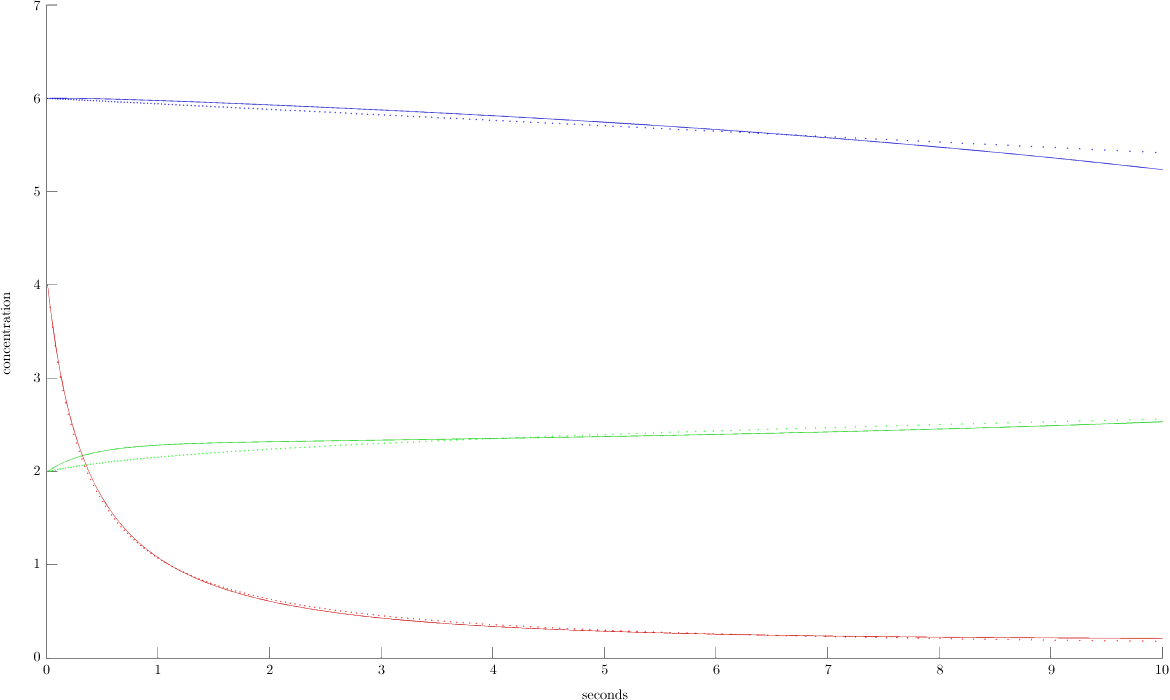
<style>
.page{position:relative;width:1170px;height:700px;background:#ffffff}
.page>*{position:absolute;margin:0}
.t1{font:14px/18.6px "CMUSerif-Roman";color:#000000}
.t2{font:14px "CMUSerif-Roman";color:#000000}
.t3{font:14px "CMUSerif-Roman";letter-spacing:0.377em;color:#000000}
</style>
<div class="page">
<p class="t1" style="left:34px;top:0px;width:7px;height:662px;text-align:center">7<br><br><br><br><br>6<br><br><br><br><br>5<br><br><br><br><br>4<br><br><br><br><br>3<br><br><br><br><br>2<br><br><br><br><br>1<br><br><br><br><br>0</p>
<p class="t2" style="left:0px;top:292px;width:11px;height:83px;rotate:-90deg">concentration</p>
<p class="t3" style="left:43px;top:664px;width:1012px;height:11px">0          1          2          3          4          5          6          7          8          9</p>
<p class="t2" style="left:1156px;top:664px;width:13px;height:11px">10</p>
<p class="t2" style="left:582px;top:689px;width:46px;height:11px">seconds</p>
</div>
